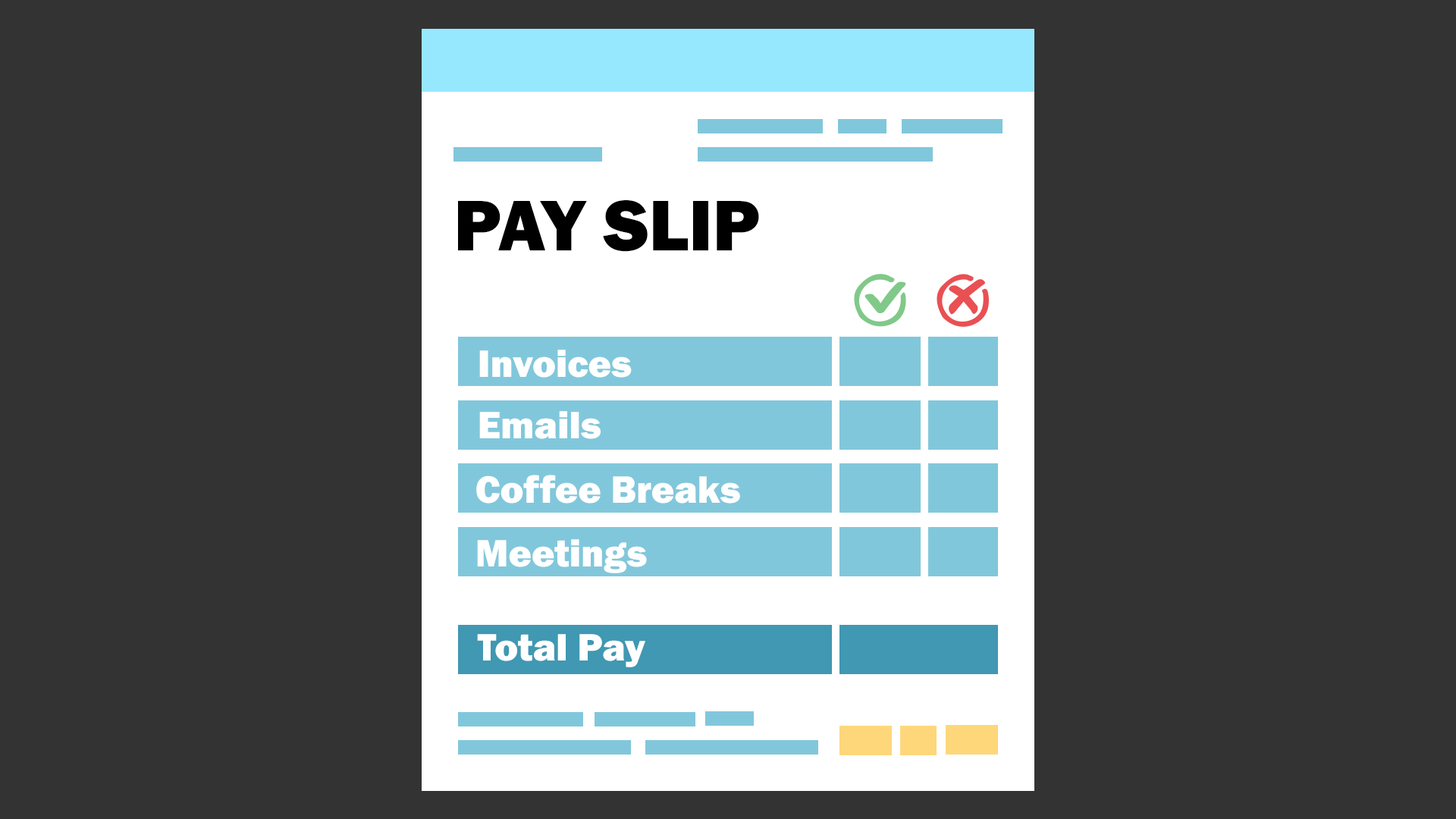
<style>
.page{position:relative;width:1456px;height:819px;background:#333333}
.page>*{position:absolute;margin:0}
.t1{font:74.3px "FranklinGothic-Heavy";color:#000000}
.t2{font:39.3px "FranklinGothic-Heavy";color:#ffffff}
</style>
<div class="page">
<p class="t1" style="left:458px;top:200px;width:301px;height:52px">PAY SLIP</p>
<p class="t2" style="left:479px;top:350px;width:153px;height:28px">Invoices</p>
<p class="t2" style="left:479px;top:411px;width:122px;height:28px">Emails</p>
<p class="t2" style="left:476px;top:475px;width:264px;height:29px">Coffee Breaks</p>
<p class="t2" style="left:477px;top:539px;width:170px;height:34px">Meetings</p>
<p class="t2" style="left:477px;top:634px;width:168px;height:33px">Total Pay</p>
</div>
